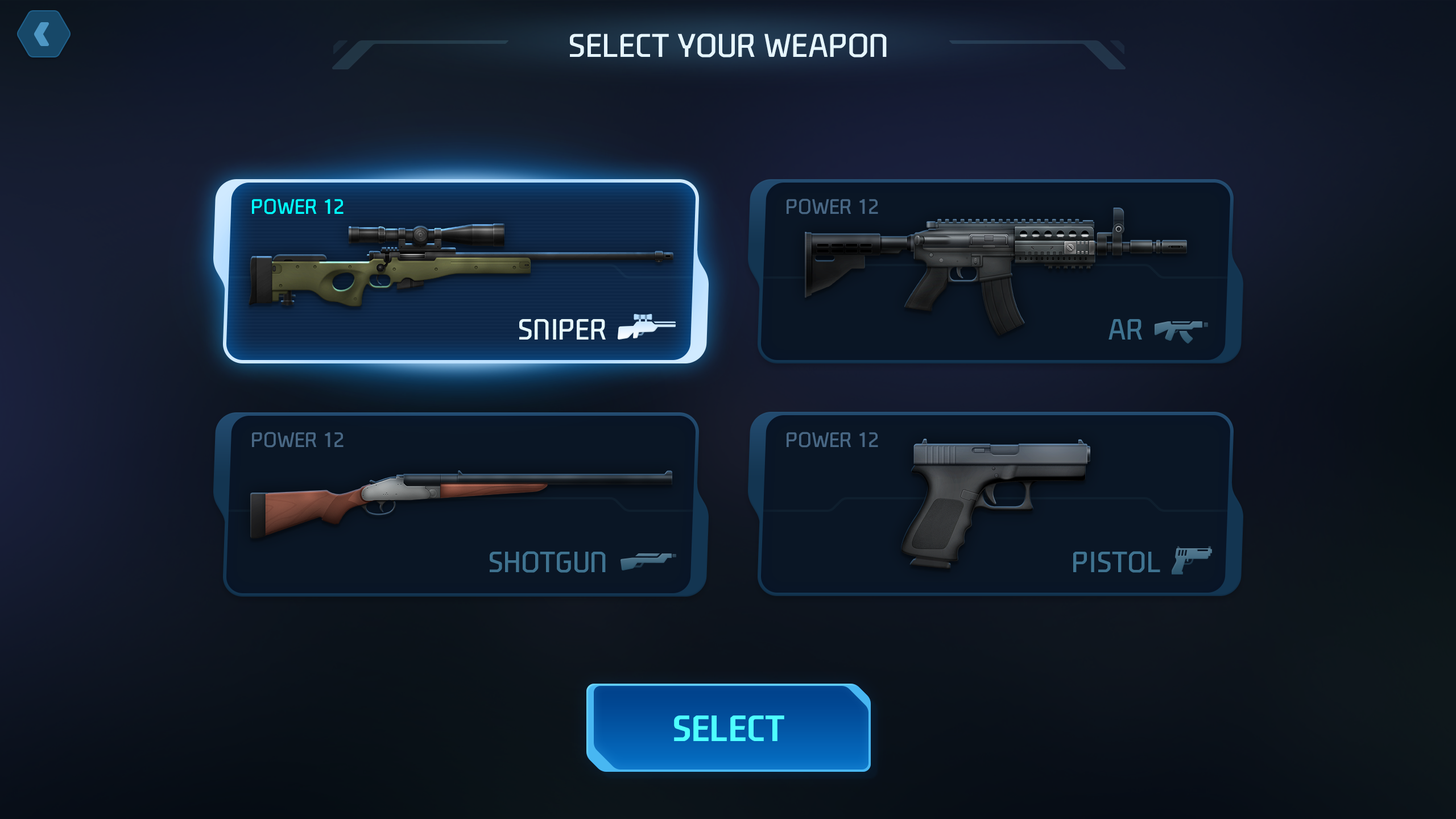
<style>
.page{position:relative;width:1456px;height:819px}
.page>*{position:absolute;margin:0}
.t1{font:31.8px "NEXONFootballGothicL";color:#e6f6ff;text-transform:uppercase}
.t2{font:20.5px "NEXONFootballGothicL";color:#00ffff;text-transform:uppercase}
.t3{font:20.5px "NEXONFootballGothicL";color:#486784;text-transform:uppercase}
.t4{font:28.4px "NEXONFootballGothicL";color:#e6f9fd;text-transform:uppercase}
.t5{font:28.4px "NEXONFootballGothicL";color:#3f7390;text-transform:uppercase}
.t6{font:35.3px "NEXONFootballGothicB";color:#4efefe;text-transform:uppercase}
</style>
<div class="page">
<p class="t1" style="left:570px;top:34px;width:317px;height:23px">Select your Weapon</p>
<p class="t2" style="left:252px;top:198px;width:92px;height:16px">Power 12</p>
<p class="t3" style="left:787px;top:198px;width:91px;height:16px">Power 12</p>
<p class="t4" style="left:519px;top:319px;width:87px;height:21px">Sniper</p>
<p class="t5" style="left:1108px;top:319px;width:34px;height:21px">AR</p>
<p class="t3" style="left:252px;top:432px;width:92px;height:16px">Power 12</p>
<p class="t3" style="left:787px;top:432px;width:91px;height:16px">Power 12</p>
<p class="t5" style="left:490px;top:551px;width:116px;height:22px">Shotgun</p>
<p class="t5" style="left:1073px;top:551px;width:87px;height:22px">pistol</p>
<p class="t6" style="left:674px;top:715px;width:110px;height:26px">Select</p>
</div>
